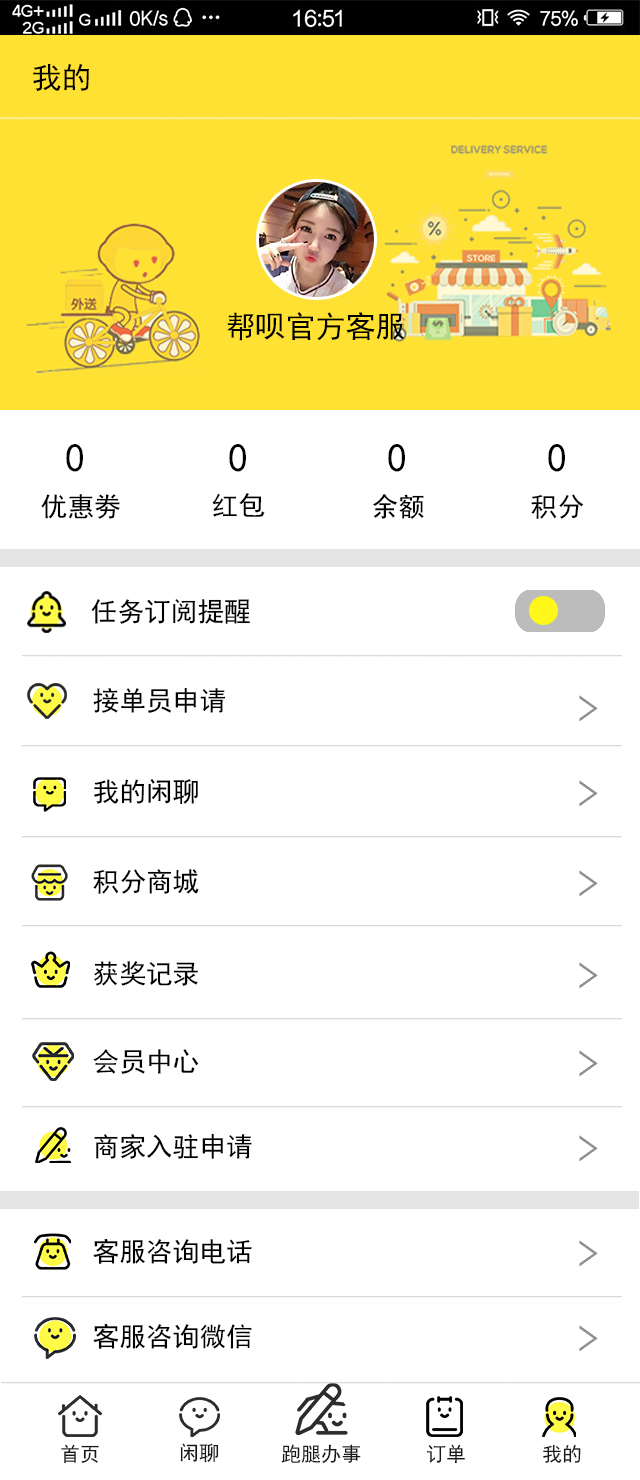
<style>
.page{position:relative;width:640px;height:1480px;background:#ffffff}
.page>*{position:absolute;margin:0}
.t1{font:30px "SimHei";letter-spacing:0.002em;color:#000000}
.t2{font:40px "SimHei";letter-spacing:0.002em;color:#000000}
.t3{font:26.7px "SimHei";letter-spacing:0.002em;color:#000000}
.t4{font:26.7px "SimHei";letter-spacing:0.002em;color:#010101}
.t5{font:33.3px "SimHei";letter-spacing:0.002em;color:#3c3c3c}
.t6{font:33.3px "SimHei";letter-spacing:0.002em;color:#000000}
.t7{font:33.3px "SimHei";letter-spacing:0.002em;color:#010101}
.t8{font:12px "SimHei";letter-spacing:0.002em;color:#181818}
</style>
<div class="page">
<p class="t1" style="left:33px;top:63px;width:56px;height:28px">我的</p>
<p class="t1" style="left:227px;top:312px;width:177px;height:29px">帮呗官方客服</p>
<p class="t2" style="left:66px;top:444px;width:17px;height:28px">0</p>
<p class="t2" style="left:229px;top:444px;width:17px;height:28px">0</p>
<p class="t2" style="left:388px;top:444px;width:17px;height:28px">0</p>
<p class="t2" style="left:548px;top:444px;width:17px;height:28px">0</p>
<p class="t3" style="left:41px;top:494px;width:79px;height:25px">优惠劵</p>
<p class="t3" style="left:212px;top:493px;width:53px;height:24px">红包</p>
<p class="t4" style="left:373px;top:494px;width:51px;height:25px">余额</p>
<p class="t3" style="left:531px;top:494px;width:53px;height:25px">积分</p>
<p class="t4" style="left:91px;top:599px;width:159px;height:25px"><span class="t5">    </span>任务订阅提醒</p>
<p class="t3" style="left:93px;top:687px;width:133px;height:26px"><span class="t5">    </span>接单员申请</p>
<p class="t3" style="left:94px;top:779px;width:104px;height:26px"><span class="t5">    </span>我的闲聊</p>
<p class="t3" style="left:93px;top:869px;width:106px;height:25px"><span class="t5">    </span>积分商城</p>
<p class="t3" style="left:94px;top:961px;width:104px;height:25px"><span class="t5">    </span>获奖记录</p>
<p class="t3" style="left:93px;top:1049px;width:106px;height:25px"><span class="t5">    </span>会员中心</p>
<p class="t3" style="left:94px;top:1133px;width:158px;height:26px"><span class="t6">    </span>商家入驻申请</p>
<p class="t3" style="left:93px;top:1238px;width:159px;height:26px"><span class="t6">    </span>客服咨询电话</p>
<p class="t4" style="left:93px;top:1323px;width:159px;height:26px"><span class="t7">    </span>客服咨询微信</p>
<p class="t8" style="left:61px;top:1444px;width:38px;height:19px">首页</p>
<p class="t8" style="left:180px;top:1443px;width:39px;height:20px">闲聊</p>
<p class="t8" style="left:281px;top:1444px;width:80px;height:20px">跑腿办事</p>
<p class="t8" style="left:426px;top:1444px;width:39px;height:20px">订单</p>
<p class="t8" style="left:543px;top:1444px;width:38px;height:19px">我的</p>
</div>
